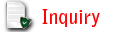
<style>
.page{position:relative;width:115px;height:32px;background:#ffffff}
.page>*{position:absolute;margin:0}
.t1{font:19px "BellGothicStd-Bold";color:#f90404}
</style>
<div class="page">
<p class="t1" style="left:42px;top:9px;width:58px;height:18px">Inquiry</p>
</div>
